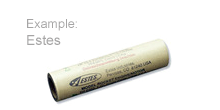
<style>
.page{position:relative;width:220px;height:110px;background:#ffffff}
.page>*{position:absolute;margin:0}
.t1{font:12.5px "ArialMT";color:#a6a5a5}
.t2{font:13.9px "ArialMT";color:#a6a5a5}
</style>
<div class="page">
<p class="t1" style="left:27px;top:19px;width:50px;height:26px">Example:<br><span class="t2">Estes</span></p>
</div>
